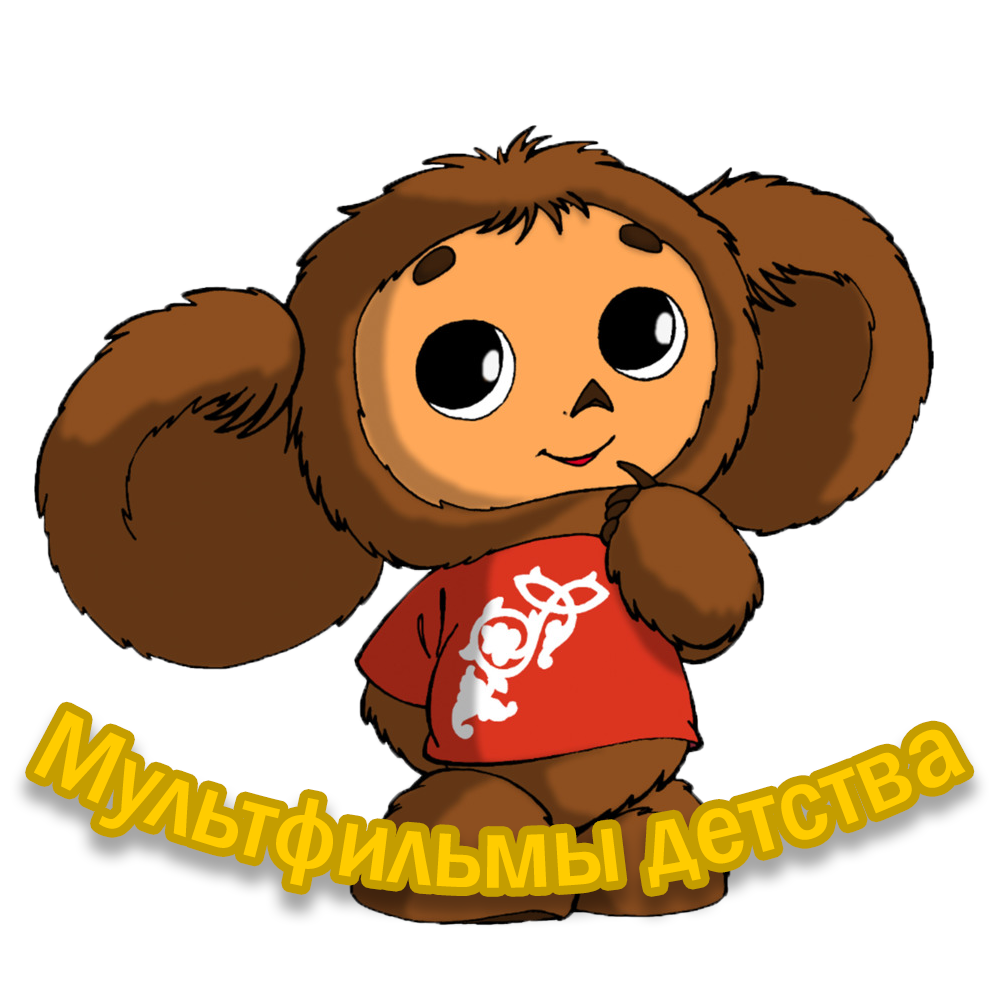
<style>
.page{position:relative;width:1000px;height:1000px;background:#ffffff}
.page>*{position:absolute;margin:0}
.t1{font:104.7px "FranklinGothic-MediumCond";color:#ffcc00}
</style>
<div class="page">
<p class="t1" style="left:34px;top:710px;width:932px;height:178px">Мультфильмы детства</p>
</div>
